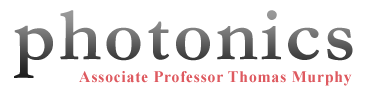
<style>
.page{position:relative;width:369px;height:103px;background:#ffffff}
.page>*{position:absolute;margin:0}
.t1{font:76px "Garamond-Bold";letter-spacing:0.04em}
.t2{font:16px "TimesNewRomanPS-BoldMT";letter-spacing:0.04em;color:#de5a60}
</style>
<div class="page">
<p class="t1" style="left:14px;top:10px;width:339px;height:68px">photonics</p>
<p class="t2" style="left:79px;top:71px;width:273px;height:15px">Associate Professor Thomas Murphy</p>
</div>
